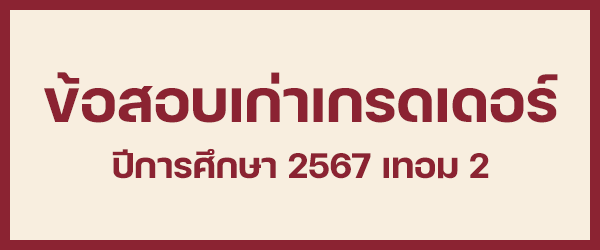
<style>
.page{position:relative;width:600px;height:250px;background:#f8eedf}
.page>*{position:absolute;margin:0}
.t1{font:80px "FCMinimalBold";color:#8b2332}
.t2{font:48px "FCMinimalBold";color:#8b2332}
</style>
<div class="page">
<p class="t1" style="left:44px;top:72px;width:514px;height:51px">ข้อสอบเก่าเกรดเดอร์</p>
<p class="t2" style="left:112px;top:148px;width:377px;height:31px">ปีการศึกษา 2567 เทอม 2</p>
</div>
